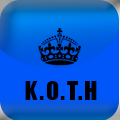
<style>
.page{position:relative;width:120px;height:120px;background:#0056f8}
.page>*{position:absolute;margin:0}
.t1{font:24px "Impact";letter-spacing:0.075em;color:#000007}
</style>
<div class="page">
<p class="t1" style="left:25px;top:81px;width:72px;height:19px">K.O.T.H</p>
</div>
